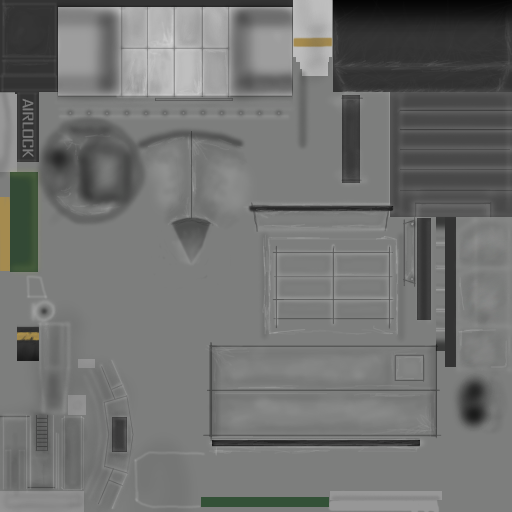
<style>
.page{position:relative;width:512px;height:512px;background:#7d7e7d}
.page>*{position:absolute;margin:0}
.t1{font:13.9px "AgencyFB-Reg";letter-spacing:-0.04em;color:#7a7a7a;scale:1.79 1}
</style>
<div class="page">
<p class="t1" style="left:22px;top:98px;width:12px;height:60px;rotate:90deg">AIRLOCK</p>
</div>
